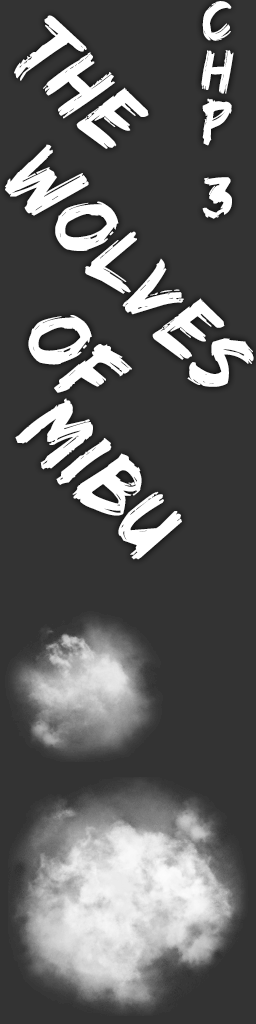
<style>
.page{position:relative;width:256px;height:1024px;background:#333333}
.page>*{position:absolute;margin:0}
.t1{font:60px/25.1px "EdoSZ";letter-spacing:0.03em;color:#ffffff}
.t2{font:91.3px "EdoSZ";letter-spacing:0.03em;color:#ffffff;scale:0.96 1}
</style>
<div class="page">
<p class="t1" style="left:201px;top:1px;width:33px;height:218px;text-align:center">C<br><br>H<br><br>P<br><br><br>3</p>
<p class="t2" style="left:14px;top:15px;width:135px;height:134px;rotate:45deg">The</p>
<p class="t2" style="left:5px;top:144px;width:249px;height:243px;rotate:45deg">Wolves</p>
<p class="t2" style="left:28px;top:315px;width:104px;height:78px;rotate:45deg">of</p>
<p class="t2" style="left:15px;top:398px;width:167px;height:162px;rotate:45deg">Mibu</p>
</div>
